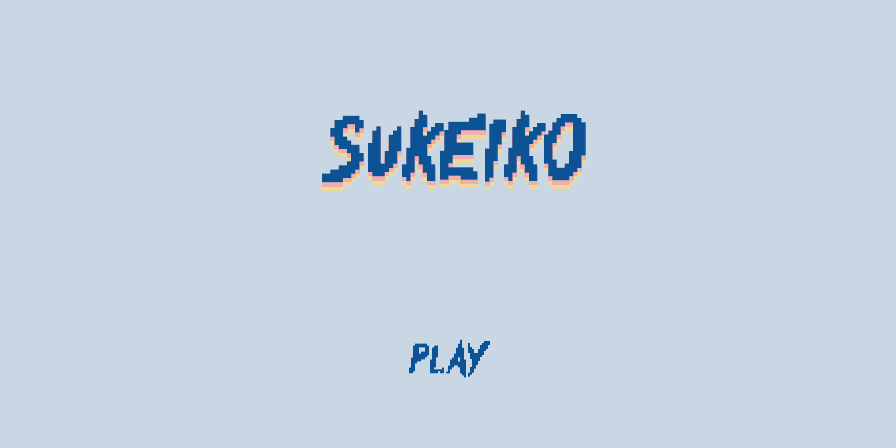
<style>
.page{position:relative;width:896px;height:448px;background:#c9d7e4}
.page>*{position:absolute;margin:0}
.t1{font:150px "Fight!";color:#0b5394}
.t2{font:72px "Fight!";color:#0b5394}
</style>
<div class="page">
<p class="t1" style="left:322px;top:110px;width:264px;height:73px">sukeiko</p>
<p class="t2" style="left:409px;top:339px;width:81px;height:39px">play</p>
</div>
